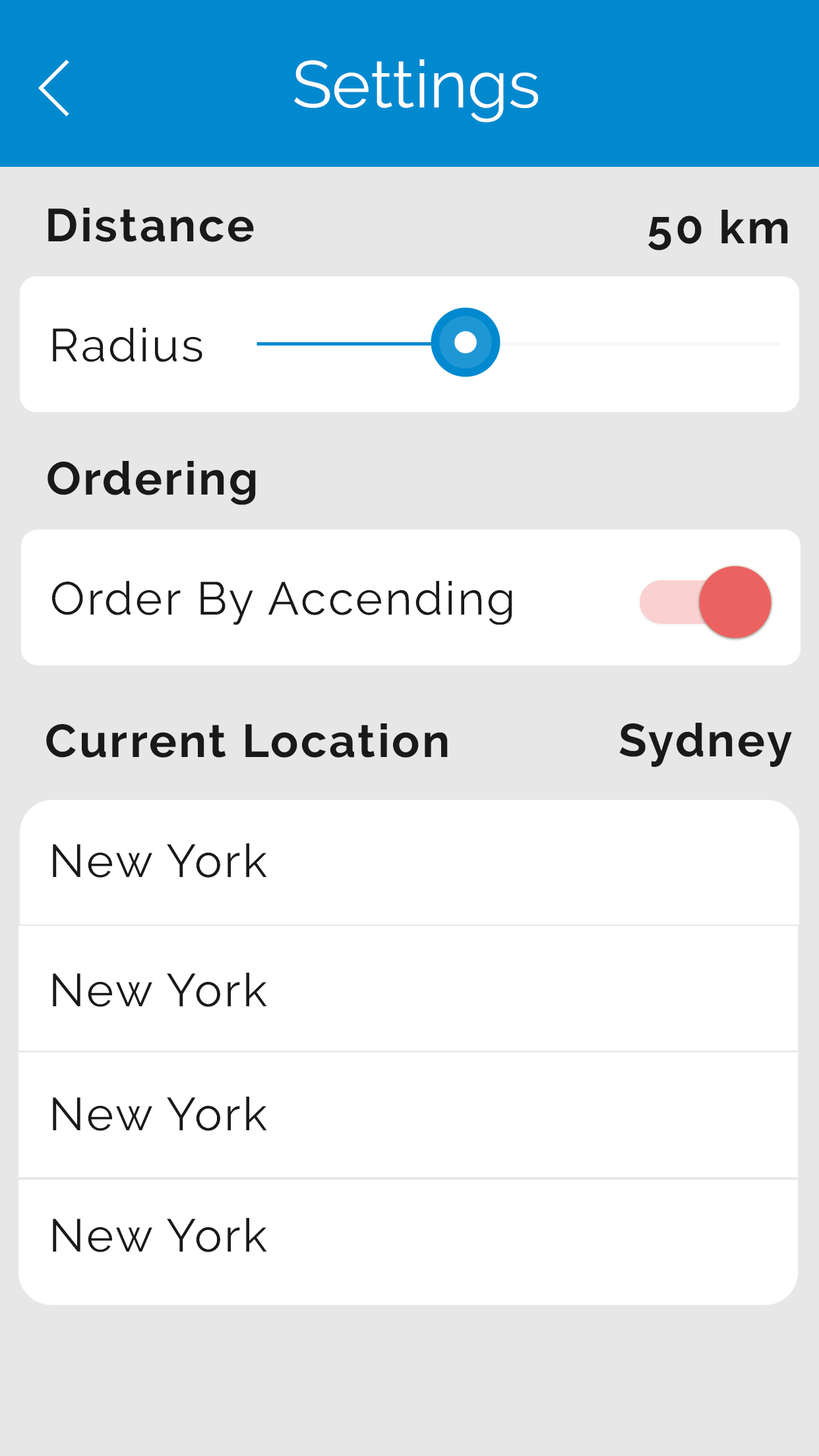
<style>
.page{position:relative;width:819px;height:1456px;background:#ffffff}
.page>*{position:absolute;margin:0}
.t1{font:65.9px "Raleway-Regular";color:#fdfeff}
.t2{font:46.2px "Raleway-Bold";letter-spacing:0.05em;color:#191919}
.t3{font:46.2px "Raleway-Regular";letter-spacing:0.05em;color:#191919}
</style>
<div class="page">
<p class="t1" style="left:294px;top:59px;width:244px;height:64px">Settings</p>
<p class="t2" style="left:48px;top:208px;width:206px;height:34px">Distance</p>
<p class="t2" style="left:648px;top:210px;width:140px;height:41px">50 km</p>
<p class="t3" style="left:53px;top:328px;width:149px;height:34px">Radius</p>
<p class="t2" style="left:47px;top:461px;width:209px;height:44px">Ordering</p>
<p class="t3" style="left:52px;top:581px;width:460px;height:44px">Order By Accending</p>
<p class="t2" style="left:46px;top:723px;width:402px;height:35px">Current Location</p>
<p class="t2" style="left:619px;top:723px;width:173px;height:44px">Sydney</p>
<p class="t3" style="left:53px;top:843px;width:214px;height:35px">New York</p>
<p class="t3" style="left:53px;top:973px;width:214px;height:34px">New York</p>
<p class="t3" style="left:53px;top:1097px;width:214px;height:34px">New York</p>
<p class="t3" style="left:53px;top:1218px;width:214px;height:34px">New York</p>
</div>
